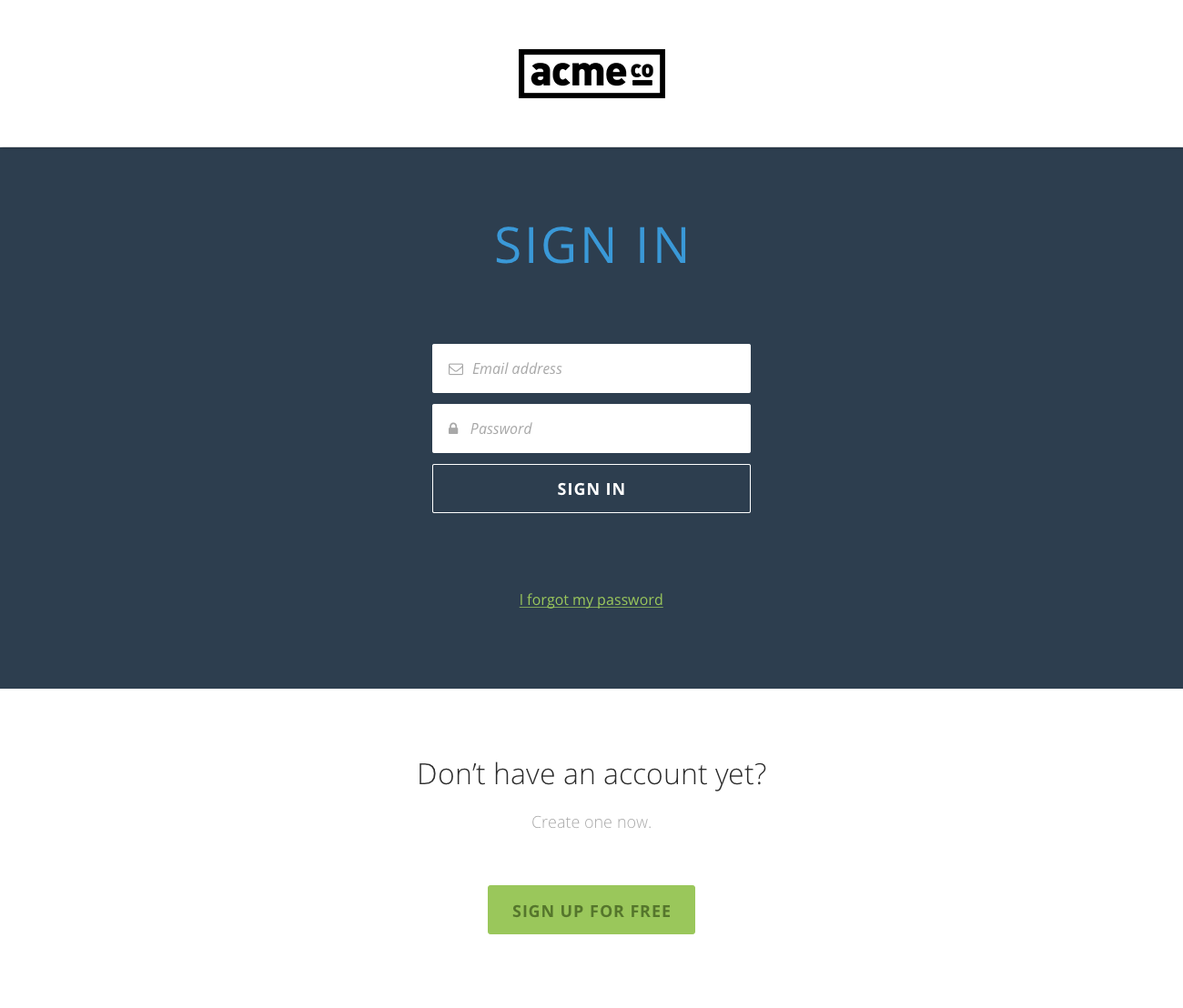
<style>
.page{position:relative;width:1183px;height:1008px;background:#2d3e4f}
.page>*{position:absolute;margin:0}
.t1{font:50px "OpenSans";letter-spacing:0.05em;color:#3a99d8;text-transform:uppercase}
.t2{font:16.4px "OpenSans-Bold";letter-spacing:0.05em;color:#ffffff;text-transform:uppercase}
.t3{font:14.6px "OpenSans";color:#9ac75b;text-decoration:underline}
.t4{font:29.1px/43.7px "OpenSans-Light";color:#2c2c2c}
.t5{font:16.4px/43.7px "OpenSans-Light";color:#a8a8a8}
.t6{font:16.4px "OpenSans-Bold";letter-spacing:0.05em;color:#55762c;text-transform:uppercase}
</style>
<div class="page">
<p class="t1" style="left:496px;top:227px;width:190px;height:37px">SIGN IN</p>
<p class="t2" style="left:558px;top:482px;width:66px;height:14px">Sign In</p>
<p class="t3" style="left:519px;top:593px;width:144px;height:16px">I forgot my password</p>
<p class="t4" style="left:419px;top:762px;width:347px;height:67px;text-align:center">Don’t have an account yet?<br><span class="t5">Create one now.</span></p>
<p class="t6" style="left:512px;top:904px;width:158px;height:14px">Sign Up for free</p>
</div>
